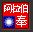
<style>
.page{position:relative;width:33px;height:32px;background:#f20000}
.page>*{position:absolute;margin:0}
.t1{font:10.4px "SimSun";letter-spacing:-0.25em;color:#ffffff}
.t2{font:11.7px "SimSun";color:#ffffff}
</style>
<div class="page">
<p class="t1" style="left:4px;top:4px;width:24px;height:9px">阿拉伯</p>
<p class="t2" style="left:16px;top:15px;width:11px;height:12px">奉</p>
</div>
